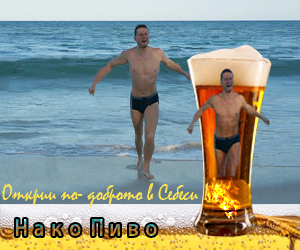
<style>
.page{position:relative;width:300px;height:250px}
.page>*{position:absolute;margin:0}
.t1{font:23.7px "Mistral";color:#ffe552;scale:0.85 1}
</style>
<div class="page">
<p class="t1" style="left:2px;top:183px;width:207px;height:24px">Открии по- доброто в Себеси !</p>
</div>
